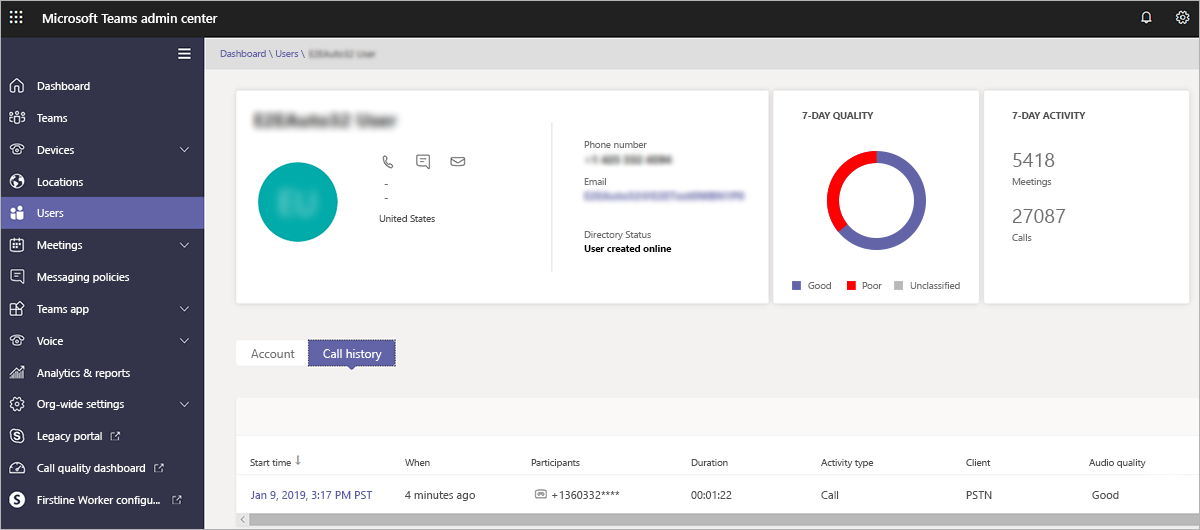
<style>
.page{position:relative;width:1200px;height:530px;background:#ffffff}
.page>*{position:absolute;margin:0}
.t1{font:12.8px "SegoeUI-Semibold";color:#ffffff}
.t2{font:9.6px "SegoeUI";color:#6264a7}
.t3{font:11.1px "SegoeUI";color:#ffffff}
.t4{font:9.6px "SegoeUI-Bold";color:#505050}
.t5{font:9.6px "SegoeUI";color:#707070}
.t6{font:20px "SegoeUI";color:#707070}
.t7{font:9.6px "SegoeUI";color:#505050}
.t8{font:9.6px "SegoeUI-Bold";color:#000000}
.t9{font:12px "SegoeUI";color:#707070}
.t10{font:12px "SegoeUI";color:#ffffff}
.t11{font:11.2px "SegoeUI";color:#5a5ca6}
.t12{font:11.2px "SegoeUI";color:#505050}
</style>
<div class="page">
<p class="t1" style="left:42px;top:13px;width:176px;height:10px">Microsoft Teams admin center</p>
<p class="t2" style="left:220px;top:50px;width:85px;height:8px">Dashboard \ Users \</p>
<p class="t3" style="left:37px;top:82px;width:53px;height:8px">Dashboard</p>
<p class="t4" style="left:802px;top:112px;width:72px;height:8px">7-DAY QUALITY</p>
<p class="t4" style="left:1012px;top:112px;width:74px;height:7px">7-DAY ACTIVITY</p>
<p class="t3" style="left:37px;top:114px;width:31px;height:8px">Teams</p>
<p class="t3" style="left:37px;top:146px;width:37px;height:8px">Devices</p>
<p class="t5" style="left:584px;top:141px;width:63px;height:7px">Phone number</p>
<p class="t6" style="left:1013px;top:153px;width:42px;height:14px">5418</p>
<p class="t3" style="left:37px;top:178px;width:46px;height:8px">Locations</p>
<p class="t5" style="left:584px;top:178px;width:22px;height:7px">Email</p>
<p class="t5" style="left:1012px;top:178px;width:40px;height:9px">Meetings</p>
<p class="t3" style="left:37px;top:209px;width:27px;height:8px">Users</p>
<p class="t6" style="left:1012px;top:209px;width:54px;height:14px">27087</p>
<p class="t7" style="left:379px;top:215px;width:56px;height:7px">United States</p>
<p class="t5" style="left:584px;top:231px;width:67px;height:9px">Directory Status</p>
<p class="t3" style="left:37px;top:241px;width:46px;height:10px">Meetings</p>
<p class="t8" style="left:584px;top:245px;width:88px;height:7px">User created online</p>
<p class="t5" style="left:1012px;top:234px;width:20px;height:7px">Calls</p>
<p class="t3" style="left:37px;top:273px;width:93px;height:10px">Messaging policies</p>
<p class="t5" style="left:808px;top:282px;width:23px;height:7px">Good</p>
<p class="t5" style="left:862px;top:282px;width:20px;height:7px">Poor</p>
<p class="t5" style="left:910px;top:282px;width:50px;height:7px">Unclassified</p>
<p class="t3" style="left:37px;top:305px;width:52px;height:10px">Teams app</p>
<p class="t3" style="left:37px;top:337px;width:26px;height:8px">Voice</p>
<p class="t9" style="left:251px;top:349px;width:44px;height:9px">Account</p>
<p class="t10" style="left:323px;top:349px;width:59px;height:12px">Call history</p>
<p class="t3" style="left:37px;top:369px;width:93px;height:10px">Analytics &amp; reports</p>
<p class="t3" style="left:37px;top:400px;width:87px;height:10px">Org-wide settings</p>
<p class="t3" style="left:37px;top:432px;width:65px;height:10px">Legacy portal</p>
<p class="t7" style="left:250px;top:459px;width:41px;height:7px">Start time</p>
<p class="t7" style="left:405px;top:459px;width:25px;height:7px">When</p>
<p class="t7" style="left:531px;top:459px;width:49px;height:9px">Participants</p>
<p class="t7" style="left:691px;top:459px;width:37px;height:7px">Duration</p>
<p class="t7" style="left:821px;top:459px;width:53px;height:9px">Activity type</p>
<p class="t7" style="left:966px;top:459px;width:25px;height:7px">Client</p>
<p class="t7" style="left:1089px;top:459px;width:57px;height:9px">Audio quality</p>
<p class="t3" style="left:37px;top:464px;width:108px;height:10px">Call quality dashboard</p>
<p class="t3" style="left:37px;top:496px;width:123px;height:10px">Firstline Worker configu...</p>
<p class="t11" style="left:251px;top:491px;width:122px;height:10px">Jan 9, 2019, 3:17 PM PST</p>
<p class="t12" style="left:405px;top:491px;width:71px;height:10px">4 minutes ago</p>
<p class="t12" style="left:552px;top:491px;width:68px;height:8px">+1360332****</p>
<p class="t12" style="left:691px;top:491px;width:41px;height:8px">00:01:22</p>
<p class="t12" style="left:821px;top:491px;width:18px;height:8px">Call</p>
<p class="t12" style="left:966px;top:491px;width:26px;height:8px">PSTN</p>
<p class="t12" style="left:1092px;top:491px;width:27px;height:8px">Good</p>
</div>
